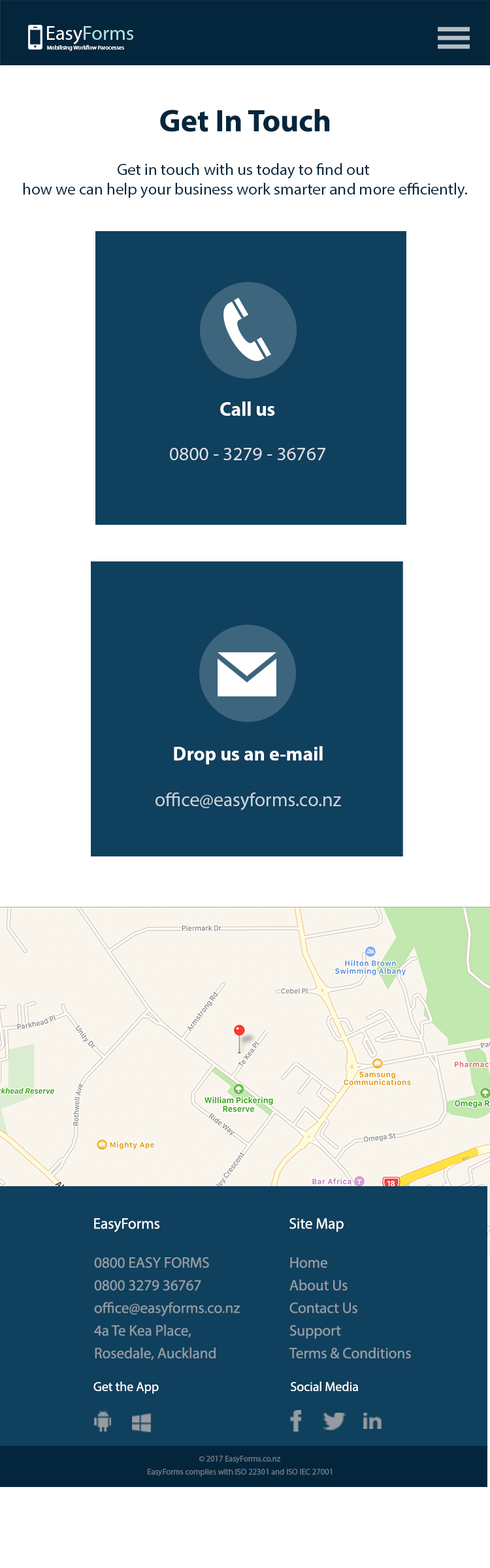
<style>
.page{position:relative;width:490px;height:1568px;background:#ffffff}
.page>*{position:absolute;margin:0}
.t1{font:20px "MyriadPro-Regular";color:#b4e3dc}
.t2{font:20px "MyriadPro-Regular";color:#ffffff}
.t3{font:5.8px "MyriadPro-Regular";color:#fcfdfd}
.t4{font:31.3px "MyriadPro-Bold";color:#04263d}
.t5{font:16.3px "MyriadPro-Regular";color:#04263d}
.t6{font:19.5px "MyriadPro-Bold";color:#ffffff}
.t7{font:19.2px "MyriadPro-Regular";color:#dce0e3}
.t8{font:19.6px "MyriadPro-Bold";color:#ffffff}
.t9{font:19.4px "MyriadPro-Regular";color:#cdd2d7}
.t10{font:15.1px "MyriadPro-Regular";color:#ffffff}
.t11{font:15.1px/11.3px "MyriadPro-Regular";color:#949ba1}
.t12{font:12.9px "MyriadPro-Regular";color:#ffffff}
.t13{font:8.2px "MyriadPro-Regular";color:#717b84}
</style>
<div class="page">
<p class="t1" style="left:47px;top:26px;width:86px;height:18px"><span class="t2">Easy</span>Forms</p>
<p class="t3" style="left:47px;top:45px;width:77px;height:6px">Mobilising Workflow Parocesses</p>
<p class="t4" style="left:160px;top:109px;width:170px;height:23px">Get In Touch</p>
<p class="t5" style="left:23px;top:163px;width:444px;height:35px;text-align:center">Get in touch with us today to find out <br>how we can help your business work smarter and more efficiently.</p>
<p class="t6" style="left:220px;top:401px;width:55px;height:15px">Call us</p>
<p class="t7" style="left:170px;top:448px;width:155px;height:12px">0800 - 3279 - 36767</p>
<p class="t8" style="left:174px;top:746px;width:148px;height:18px">Drop us an e-mail</p>
<p class="t9" style="left:155px;top:792px;width:186px;height:18px">office@easyforms.co.nz</p>
<p class="t10" style="left:94px;top:1218px;width:65px;height:14px">EasyForms</p>
<p class="t10" style="left:289px;top:1218px;width:54px;height:14px">Site Map</p>
<p class="t11" style="left:94px;top:1257px;width:146px;height:103px">0800 EASY FORMS<br><br>0800 3279 36767<br><br>office@easyforms.co.nz<br><br>4a Te Kea Place,<br><br>Rosedale, Auckland</p>
<p class="t11" style="left:289px;top:1257px;width:122px;height:101px">Home<br><br>About Us<br><br>Contact Us<br><br>Support<br><br>Terms &amp; Conditions</p>
<p class="t12" style="left:93px;top:1381px;width:66px;height:13px">Get the App</p>
<p class="t12" style="left:290px;top:1381px;width:68px;height:10px">Social Media</p>
<p class="t13" style="left:199px;top:1456px;width:81px;height:7px">© 2017 EasyForms.co.nz</p>
<p class="t13" style="left:148px;top:1469px;width:184px;height:8px">EasyForms complies with ISO 22301 and ISO IEC 27001</p>
</div>
